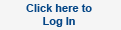
<style>
.page{position:relative;width:121px;height:30px;background:#f5f5f5}
.page>*{position:absolute;margin:0}
.t1{font:11px "Arial-BoldMT";color:#064787}
</style>
<div class="page">
<p class="t1" style="left:26px;top:4px;width:66px;height:23px;text-align:center">Click here to<br>Log In</p>
</div>
